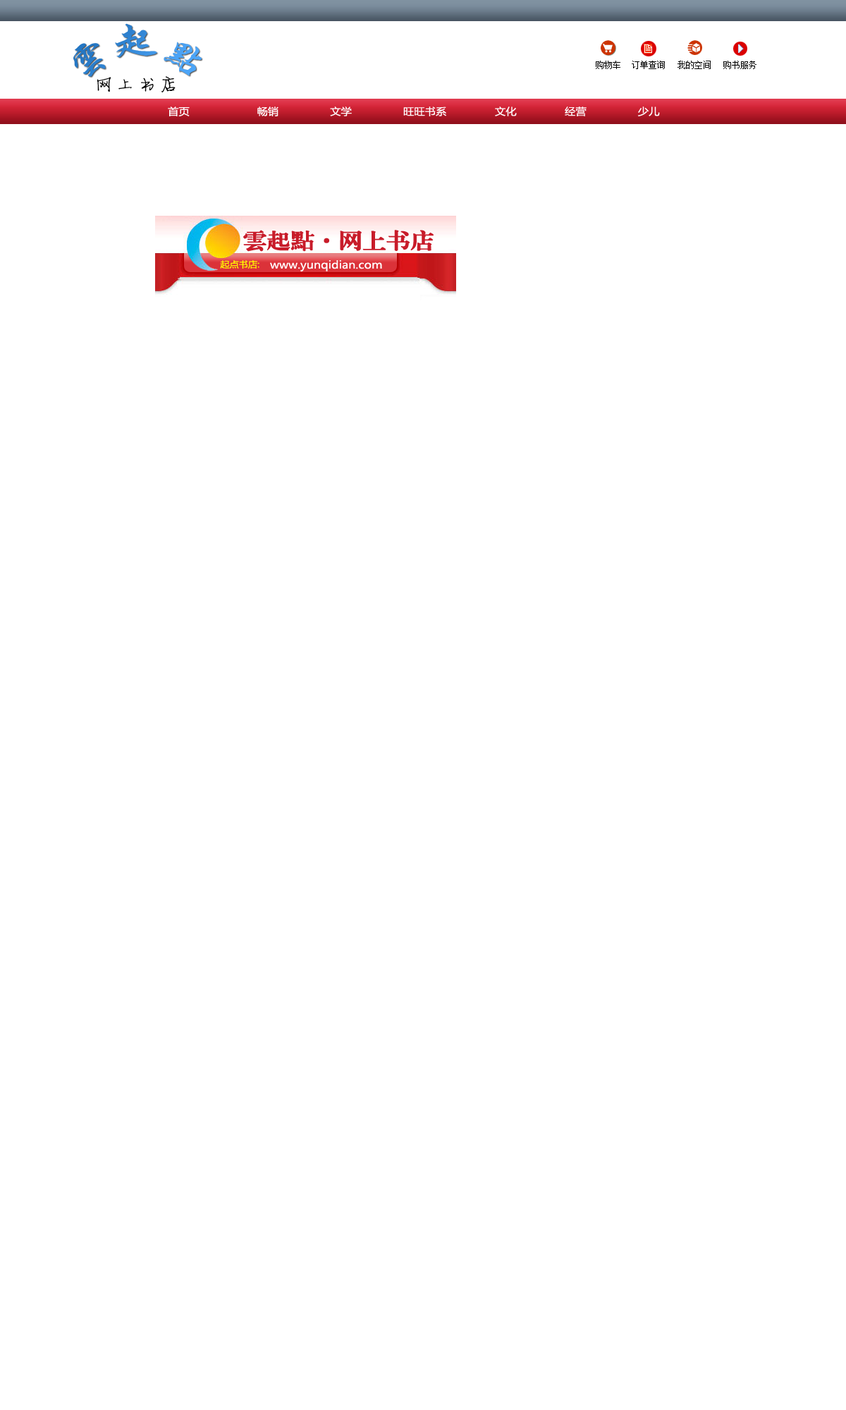
<style>
.page{position:relative;width:846px;height:1410px;background:#ffffff}
.page>*{position:absolute;margin:0}
.t1{font:39.5px "FZXKFW--GB1-0";scale:1.1 1}
.t2{font:19.7px "FZJLJW--GB1-0";color:#000000;scale:1.1 1}
.t3{font:9.9px "MicrosoftYaHei";color:#ffffff;scale:1.1 1}
.t4{font:21.1px "FZXBSJW--GB1-0";color:#c81c2a;font-weight:bold;scale:1.1 1}
.t5{font:21.1px "FZXBSFW--GB1-0";color:#c81c2a;font-weight:bold;scale:1.1 1}
.t6{font:8.5px "MicrosoftYaHei";color:#fffc00;scale:1.1 1}
.t7{font:10.6px "MicrosoftYaHei";color:#ffffff;scale:1.1 1}
</style>
<div class="page">
<p class="t1" style="left:73px;top:23px;width:129px;height:54px">云起点</p>
<p class="t2" style="left:97px;top:76px;width:79px;height:16px">网上书店</p>
<p class="t3" style="left:168px;top:106px;width:492px;height:10px">首页                     畅销                文学                旺旺书系               文化               经营                少儿</p>
<p class="t4" style="left:243px;top:230px;width:190px;height:22px"><span class="t5">云起点</span>·网上书店</p>
<p class="t6" style="left:220px;top:260px;width:39px;height:9px">起点书店:</p>
<p class="t7" style="left:270px;top:260px;width:112px;height:11px">www.yunqidian.com</p>
</div>
